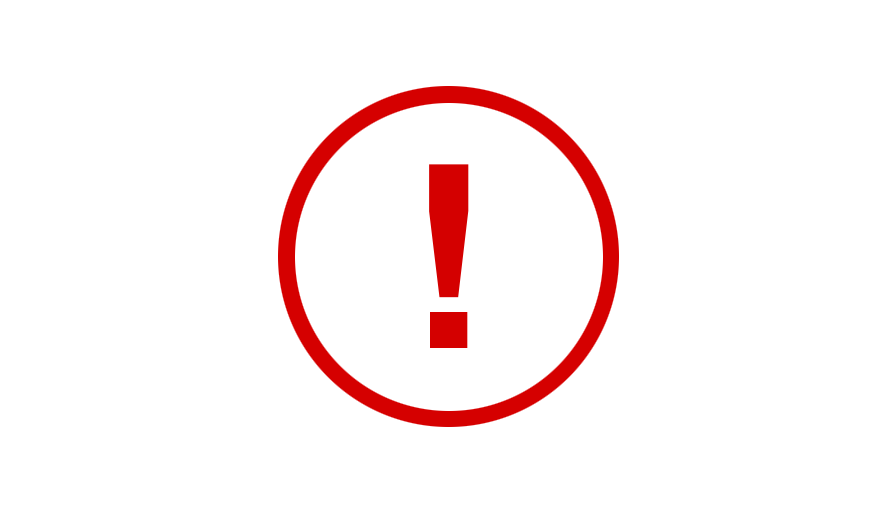
<style>
.page{position:relative;width:896px;height:512px;background:#ffffff}
.page>*{position:absolute;margin:0}
.t1{font:256px "Helvetica-Bold";color:#d40000}
</style>
<div class="page">
<p class="t1" style="left:429px;top:164px;width:40px;height:184px">!</p>
</div>
